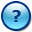
<style>
.page{position:relative;width:32px;height:32px;background:#ffffff}
.page>*{position:absolute;margin:0}
.t1{font:17px "Tahoma-Bold";color:#00347d}
</style>
<div class="page">
<p class="t1" style="left:12px;top:10px;width:9px;height:12px">?</p>
</div>
